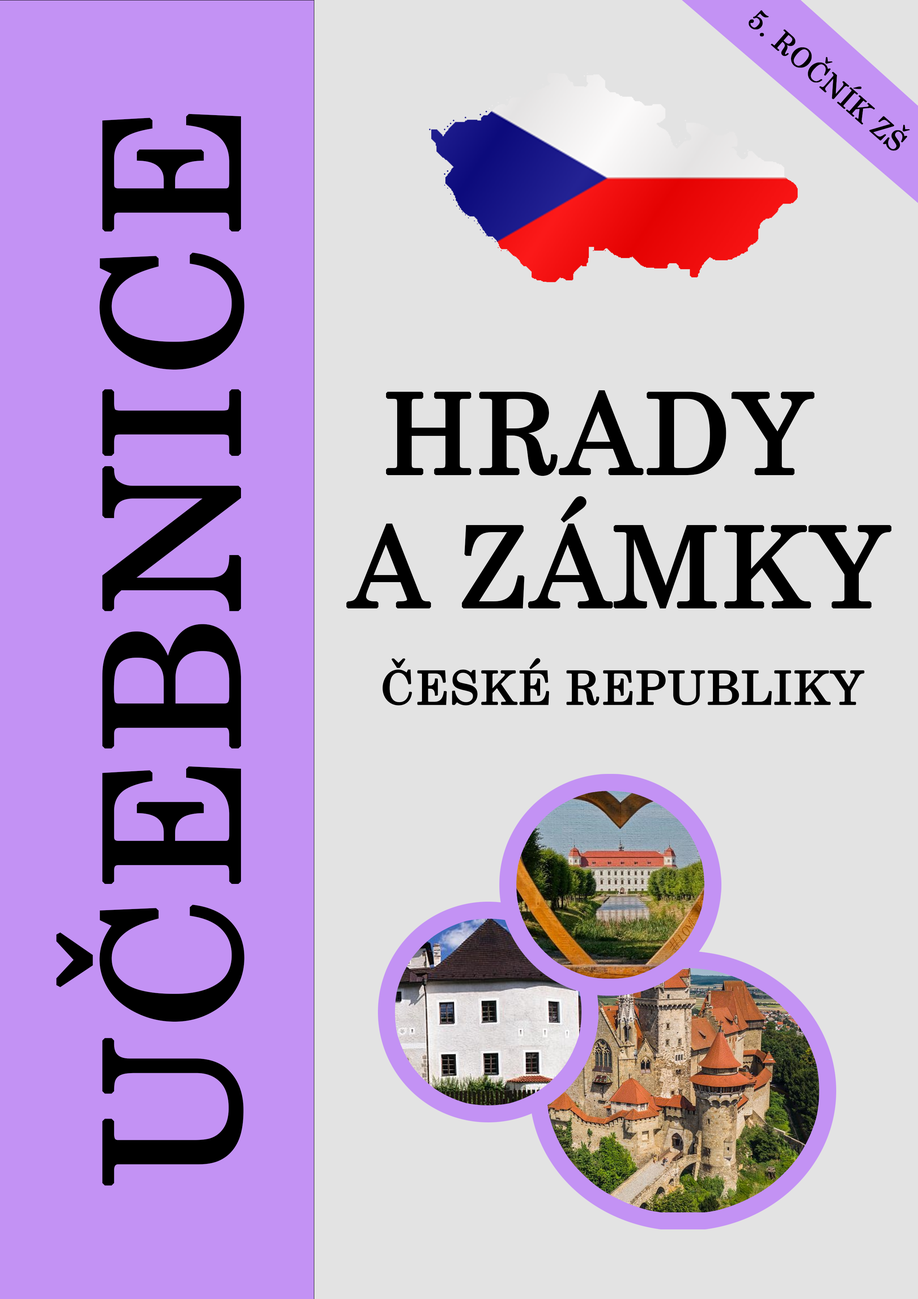
<style>
.page{position:relative;width:918px;height:1299px;background:#e3e3e3}
.page>*{position:absolute;margin:0}
.t1{font:27.8px "Century";color:#000000;font-weight:bold}
.t2{font:185.1px "Century";color:#000000;font-weight:bold}
.t3{font:111.1px "Century";color:#000000;font-weight:bold}
.t4{font:46.3px "Century";color:#000000;font-weight:bold}
</style>
<div class="page">
<p class="t1" style="left:749px;top:10px;width:161px;height:141px;rotate:41deg">5. ROČNÍK ZŠ</p>
<p class="t2" style="left:56px;top:114px;width:188px;height:1071px;rotate:-90deg">UČEBNICE</p>
<p class="t3" style="left:346px;top:390px;width:546px;height:219px">HRADY<br>A ZÁMKY</p>
<p class="t4" style="left:382px;top:658px;width:483px;height:47px">ČESKÉ REPUBLIKY</p>
</div>
